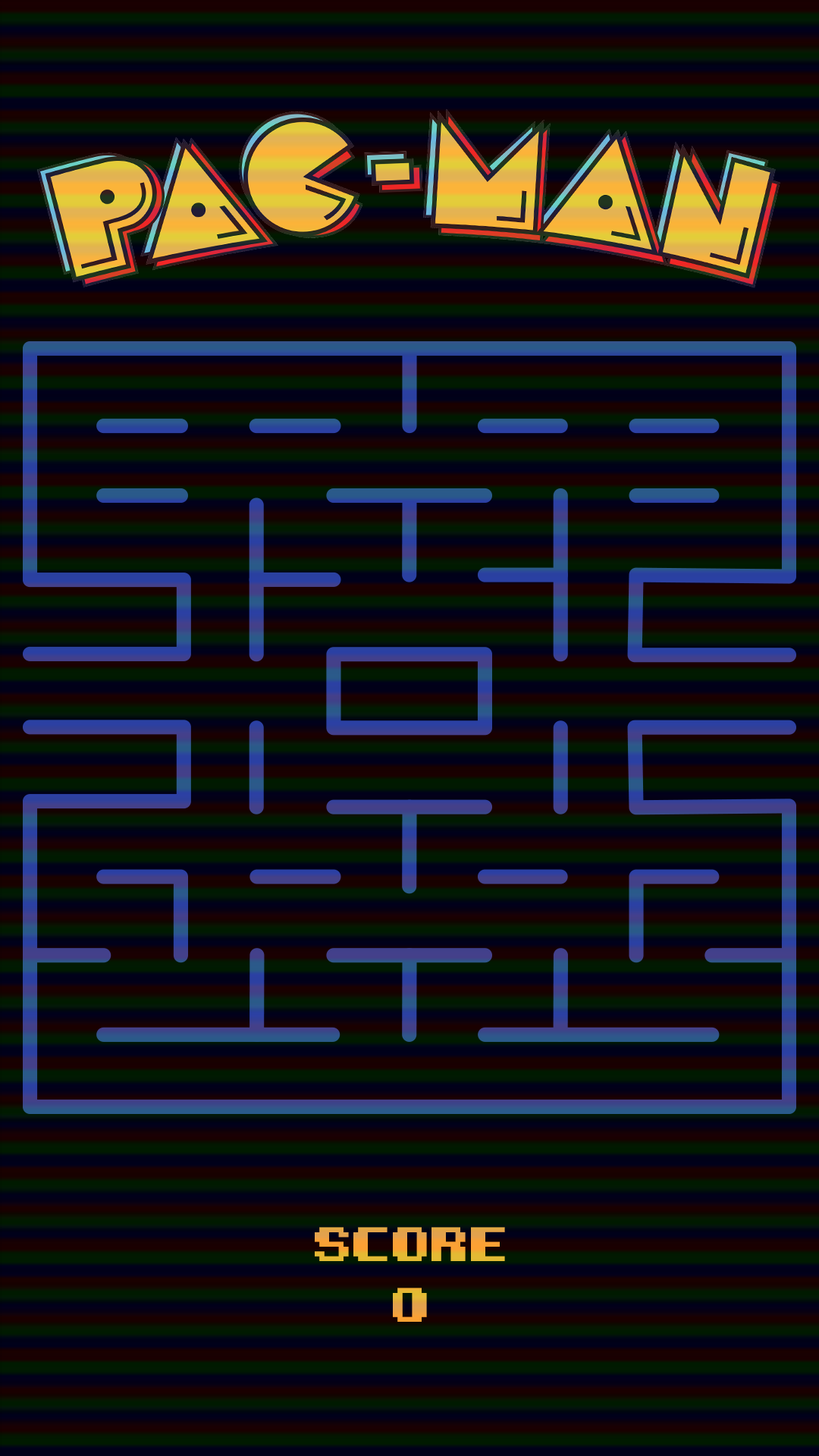
<style>
.page{position:relative;width:819px;height:1456px}
.page>*{position:absolute;margin:0}
.t1{font:49.2px "KemcoPixelBold";letter-spacing:0.01em;color:#fcb339}
</style>
<div class="page">
<p class="t1" style="left:315px;top:1227px;width:190px;height:34px">SCORE</p>
<p class="t1" style="left:393px;top:1288px;width:34px;height:34px">0</p>
</div>
